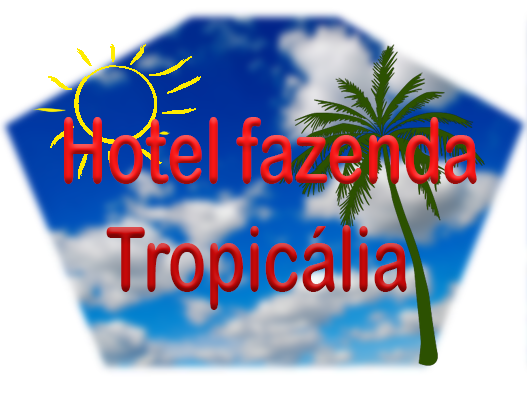
<style>
.page{position:relative;width:527px;height:411px;background:#ffffff}
.page>*{position:absolute;margin:0}
.t1{font:90px "ArialRoundedMTBold";scale:0.7 1}
</style>
<div class="page">
<p class="t1" style="left:64px;top:117px;width:413px;height:193px">Hotel fazenda<br>   Tropicália</p>
</div>
